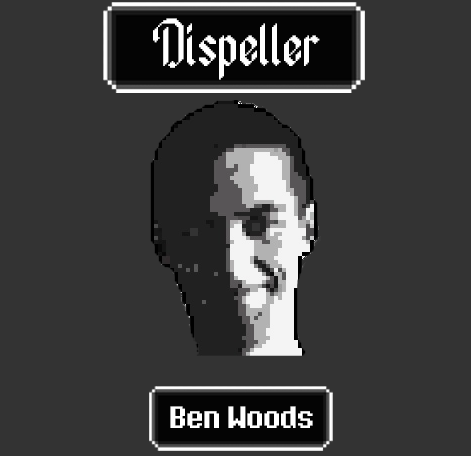
<style>
.page{position:relative;width:471px;height:456px;background:#333333}
.page>*{position:absolute;margin:0}
.t1{font:56px "Ancient-Modern-Tales";color:#ffffff}
.t2{font:24px "Eight-Bit-Dragon";color:#ffffff}
</style>
<div class="page">
<p class="t1" style="left:153px;top:18px;width:167px;height:62px">Dispeller</p>
<p class="t2" style="left:170px;top:406px;width:143px;height:22px">Ben Woods</p>
</div>
